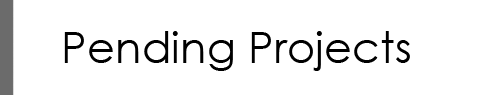
<style>
.page{position:relative;width:500px;height:95px;background:#ffffff}
.page>*{position:absolute;margin:0}
.t1{font:43.5px "CenturyGothic";color:#000000}
</style>
<div class="page">
<p class="t1" style="left:64px;top:31px;width:346px;height:40px">Pending Projects</p>
</div>
